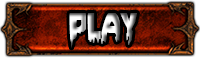
<style>
.page{position:relative;width:200px;height:58px}
.page>*{position:absolute;margin:0}
.t1{font:50px "BloodlustExpanded"}
</style>
<div class="page">
<p class="t1" style="left:69px;top:13px;width:68px;height:35px">Play</p>
</div>
